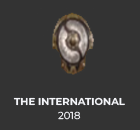
<style>
.page{position:relative;width:140px;height:130px;background:#333333}
.page>*{position:absolute;margin:0}
.t1{font:10px "Montserrat-Bold";color:#f4f5f9}
.t2{font:10px "Montserrat-Regular";color:#f4f5f9}
</style>
<div class="page">
<p class="t1" style="left:13px;top:97px;width:112px;height:9px">THE INTERNATIONAL</p>
<p class="t2" style="left:58px;top:111px;width:23px;height:9px">2018</p>
</div>
